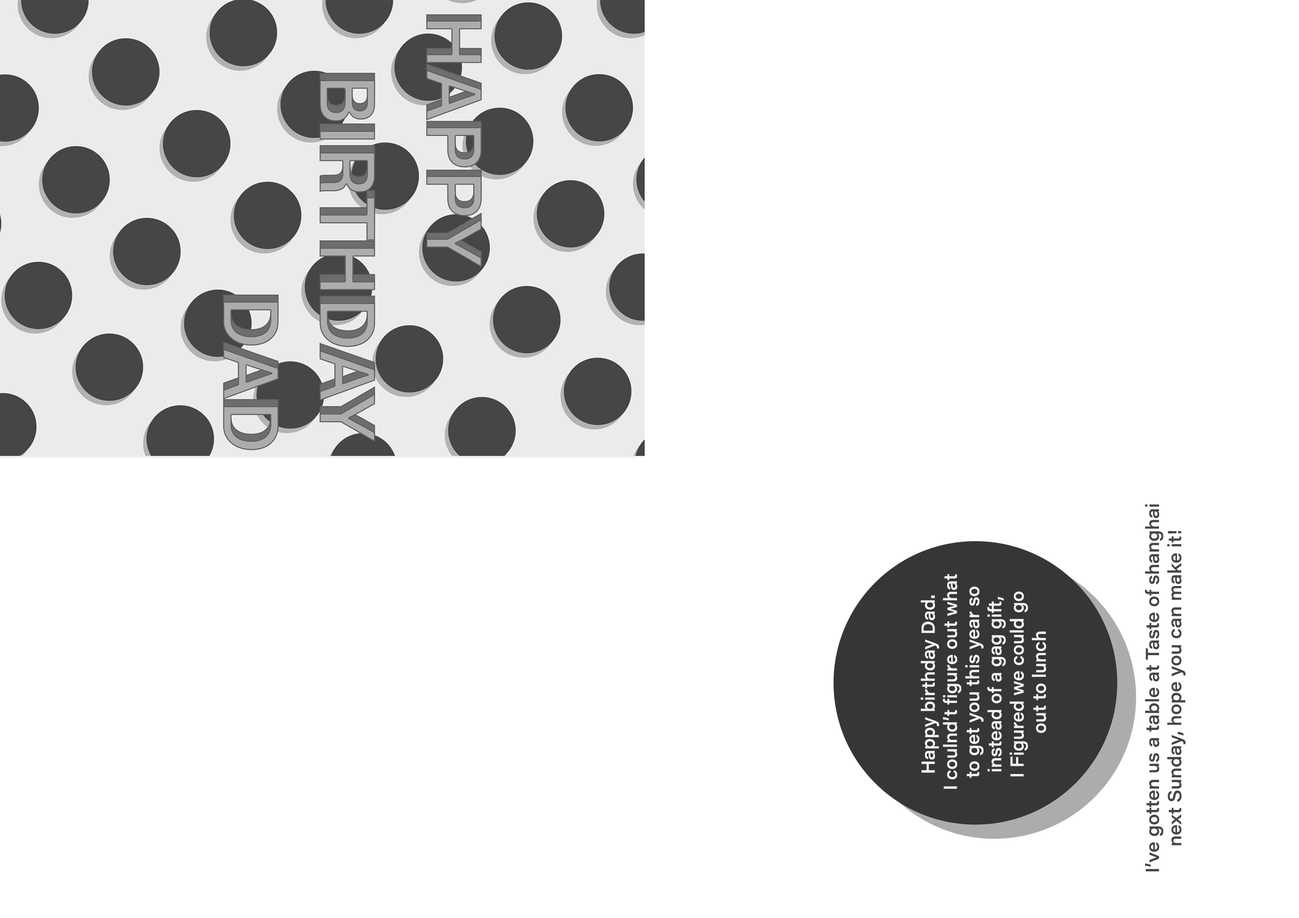
<style>
.page{position:relative;width:1299px;height:918px;background:#ffffff}
.page>*{position:absolute;margin:0}
.t1{font:4.4px "AcuminConcept_551wght_115wdth";color:#464646;scale:0.93 1}
.t2{font:18.5px "AcuminConcept_551wght_115wdth";color:#eff6f2;scale:0.91 1}
</style>
<div class="page">
<p class="t1" style="left:1145px;top:504px;width:40px;height:368px;text-align:center;rotate:-90deg">I’ve gotten us a table at Taste of shanghai<br>next Sunday, hope you can make it!</p>
<p class="t2" style="left:920px;top:574px;width:126px;height:215px;text-align:center;rotate:-90deg">Happy birthday Dad. <br>I coulnd’t figure out what<br> to get you this year so <br>instead of a gag gift, <br>I Figured we could go <br>out to lunch</p>
</div>
